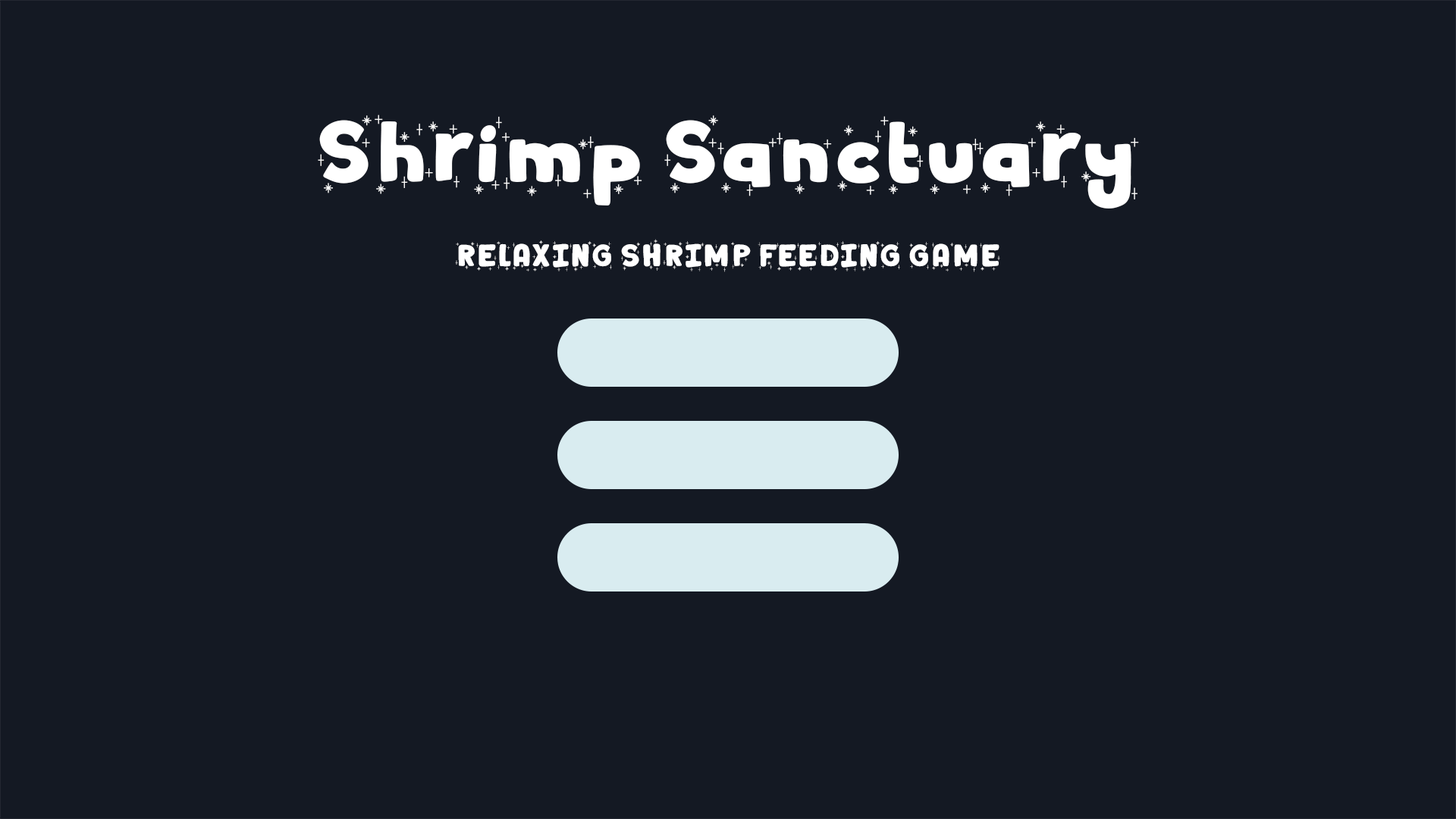
<style>
.page{position:relative;width:1456px;height:819px;background:#141923}
.page>*{position:absolute;margin:0}
.t1{font:79.6px "WinterDairy-Shiny";color:#ffffff}
.t2{font:28.4px "WinterDairy-Shiny";color:#ffffff}
</style>
<div class="page">
<p class="t1" style="left:318px;top:115px;width:821px;height:94px">Shrimp Sanctuary</p>
<p class="t2" style="left:455px;top:239px;width:545px;height:33px">RELAXING SHRIMP FEEDING GAME</p>
</div>
